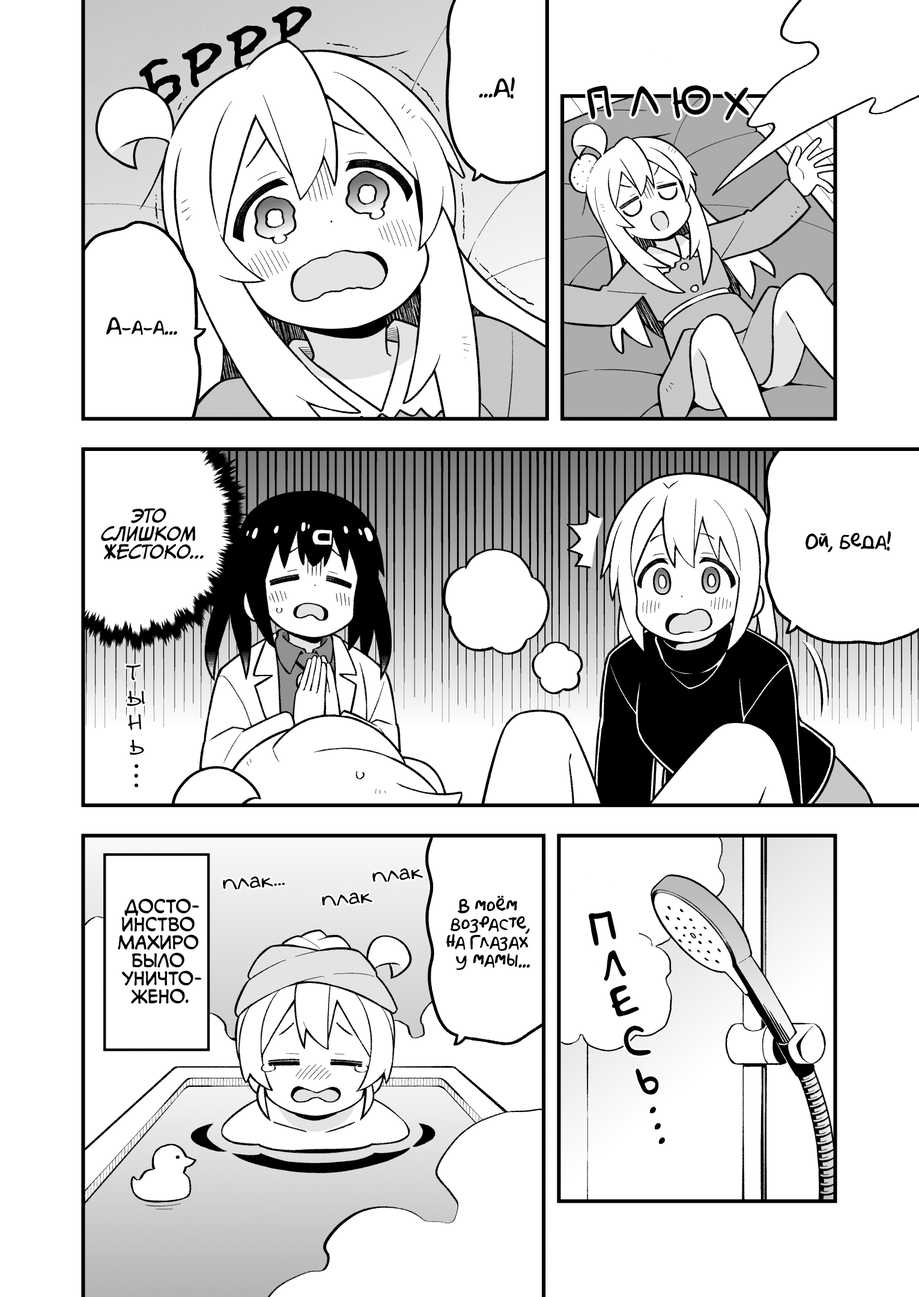
<style>
.page{position:relative;width:919px;height:1297px;background:#ffffff}
.page>*{position:absolute;margin:0}
.t1{font:64.9px "el_CCEvilSchemes";color:#000000;text-transform:uppercase}
.t2{font:21.6px "AkbarPlain";color:#000000}
.t3{font:43.2px "laCartoonerie";color:#000000;text-transform:uppercase}
.t4{font:19.8px "AkbarPlain";color:#000000}
.t5{font:18px "CCMeanwhile";color:#000000;text-transform:uppercase;font-style:italic}
.t6{font:21.6px "DSNote";color:#000000;font-weight:bold}
.t7{font:21.6px "v_Augie";color:#000000}
.t8{font:18px "v_CCMonologous";color:#000000;text-transform:uppercase}
.t9{font:18px "AkbarPlain";color:#000000}
.t10{font:36px "AkbarPlain";color:#000000;text-transform:uppercase}
</style>
<div class="page">
<p class="t1" style="left:272px;top:6px;width:40px;height:45px;rotate:-10deg">р</p>
<p class="t1" style="left:226px;top:25px;width:41px;height:45px;rotate:-7deg">р</p>
<p class="t1" style="left:182px;top:43px;width:40px;height:45px;rotate:-9deg">р</p>
<p class="t1" style="left:139px;top:58px;width:42px;height:50px;rotate:-20deg">б</p>
<p class="t2" style="left:479px;top:77px;width:36px;height:22px">...А!</p>
<p class="t3" style="left:587px;top:85px;width:24px;height:35px;rotate:-10deg">п</p>
<p class="t3" style="left:631px;top:86px;width:28px;height:31px;rotate:-7deg">л</p>
<p class="t3" style="left:673px;top:85px;width:38px;height:33px;rotate:-9deg">ю</p>
<p class="t3" style="left:724px;top:87px;width:25px;height:34px;rotate:-8deg">х</p>
<p class="t4" style="left:106px;top:317px;width:71px;height:18px">А-а-а...</p>
<p class="t5" style="left:101px;top:508px;width:103px;height:52px;text-align:center">Это<br>слишком<br>жестоко...</p>
<p class="t4" style="left:806px;top:531px;width:85px;height:22px">Ой, беда!</p>
<p class="t6" style="left:126px;top:664px;width:15px;height:17px;rotate:-5deg">т</p>
<p class="t6" style="left:127px;top:691px;width:18px;height:15px;rotate:-5deg">ы</p>
<p class="t6" style="left:128px;top:714px;width:13px;height:16px;rotate:-5deg">н</p>
<p class="t6" style="left:129px;top:739px;width:15px;height:16px;rotate:-5deg">ь</p>
<p class="t6" style="left:134px;top:774px;width:4px;height:4px">.</p>
<p class="t6" style="left:135px;top:764px;width:4px;height:4px">.</p>
<p class="t6" style="left:135px;top:784px;width:3px;height:3px">.</p>
<p class="t7" style="left:372px;top:869px;width:51px;height:13px;rotate:-7deg">плак</p>
<p class="t7" style="left:223px;top:876px;width:62px;height:14px;rotate:-5deg">плак...</p>
<p class="t7" style="left:322px;top:893px;width:50px;height:13px;rotate:-6deg">плак</p>
<p class="t8" style="left:118px;top:899px;width:83px;height:105px;text-align:center">Досто-<br>инство<br>Махиро<br>было<br>уничто-<br>жено.</p>
<p class="t9" style="left:446px;top:896px;width:84px;height:75px;text-align:center">В моём<br>возрасте,<br>на глазах<br>у мамы...</p>
<p class="t10" style="left:589px;top:911px;width:27px;height:35px;rotate:-12deg">п</p>
<p class="t10" style="left:604px;top:950px;width:22px;height:32px;rotate:-10deg">л</p>
<p class="t10" style="left:610px;top:985px;width:29px;height:32px;rotate:-15deg">е</p>
<p class="t10" style="left:624px;top:1026px;width:27px;height:30px;rotate:-15deg">с</p>
<p class="t10" style="left:636px;top:1069px;width:23px;height:26px;rotate:-14deg">ь</p>
<p class="t10" style="left:650px;top:1107px;width:6px;height:7px">.</p>
<p class="t10" style="left:655px;top:1123px;width:6px;height:7px">.</p>
<p class="t10" style="left:659px;top:1138px;width:6px;height:6px">.</p>
</div>
